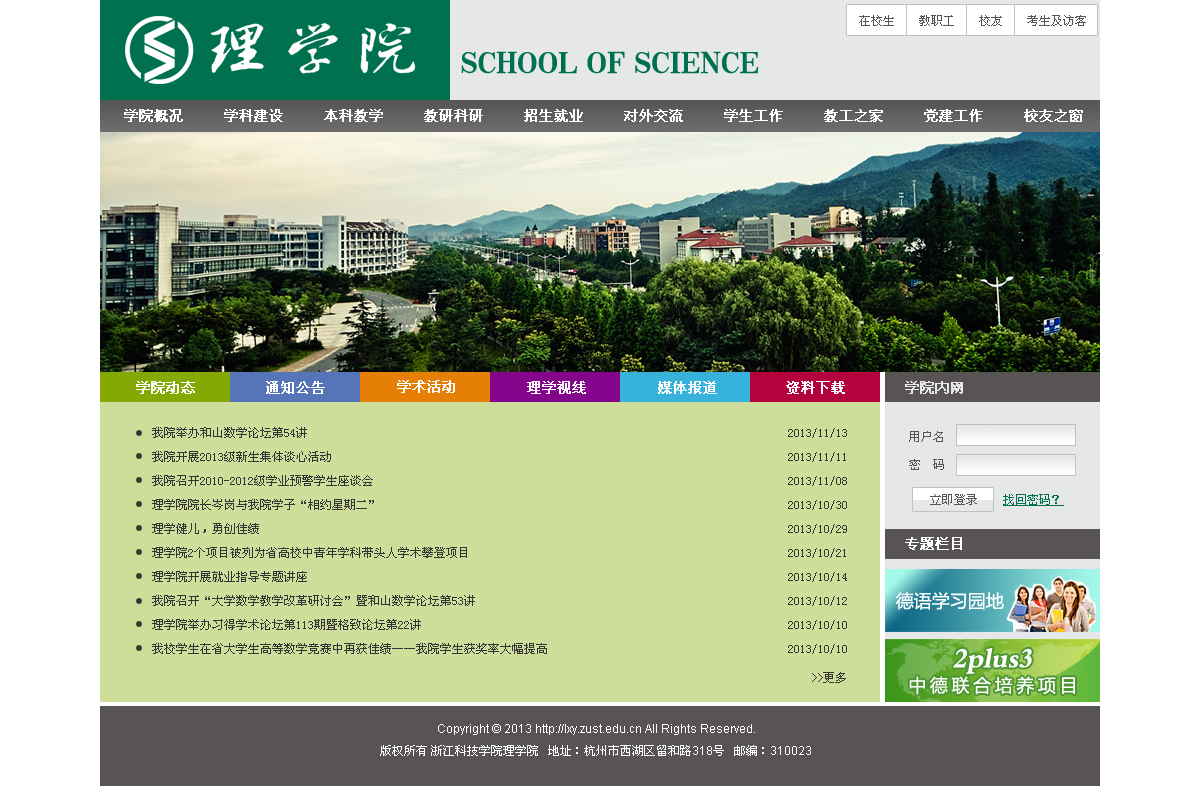
<style>
.page{position:relative;width:1200px;height:786px;background:#cedd9a}
.page>*{position:absolute;margin:0}
.t1{font:12px "SimSun";color:#575453}
.t2{font:30px "¾­µä´ÖËÎ¼ò-regular";color:#00714f}
.t3{font:14px "SimSun";color:#ffffff;font-weight:bold}
.t4{font:14px "SimSun";color:#e6e7e8;font-weight:bold}
.t5{font:12px/24px "SimSun";color:#333333}
.t6{font:12px/28px "SimSun";color:#575453}
.t7{font:12px "SimSun";color:#00714f;text-decoration:underline}
.t8{font:12px "SimSun";color:#333333}
.t9{font:12px/22px "ArialMT";color:#ffffff}
.t10{font:12px/22px "SimSun";color:#ffffff}
</style>
<div class="page">
<p class="t1" style="left:859px;top:15px;width:227px;height:11px">在校生 　 教职工 　 校友 　 考生及访客</p>
<p class="t2" style="left:461px;top:51px;width:298px;height:23px">SCHOOL OF SCIENCE</p>
<p class="t3" style="left:124px;top:109px;width:959px;height:13px">学院概况     学科建设     本科教学     教研科研     招生就业     对外交流     学生工作     教工之家     党建工作     校友之窗</p>
<p class="t3" style="left:136px;top:381px;width:59px;height:13px">学院动态</p>
<p class="t3" style="left:266px;top:381px;width:59px;height:13px">通知公告</p>
<p class="t3" style="left:397px;top:380px;width:58px;height:13px">学术活动</p>
<p class="t3" style="left:527px;top:381px;width:59px;height:13px">理学视线</p>
<p class="t3" style="left:658px;top:381px;width:59px;height:13px">媒体报道</p>
<p class="t3" style="left:786px;top:381px;width:59px;height:13px">资料下载</p>
<p class="t4" style="left:905px;top:381px;width:58px;height:13px">学院内网</p>
<p class="t5" style="left:152px;top:427px;width:695px;height:227px">我院举办和山数学论坛第54讲                 2013/11/13 <br>我院开展2013级新生集体谈心活动                2013/11/11 <br>我院召开2010-2012级学业预警学生座谈会               2013/11/08 <br>理学院院长岑岗与我院学子“相约星期二”               2013/10/30 <br>理学健儿，勇创佳绩                  2013/10/29 <br>理学院2个项目被列为省高校中青年学科带头人学术攀登项目             2013/10/21 <br>理学院开展就业指导专题讲座                 2013/10/14 <br>我院召开“大学数学教学改革研讨会”暨和山数学论坛第53讲            2013/10/12 <br>理学院举办习得学术论坛第113期暨格致论坛第22讲              2013/10/10 <br>我校学生在省大学生高等数学竞赛中再获佳绩——我院学生获奖率大幅提高          2013/10/10</p>
<p class="t6" style="left:909px;top:431px;width:35px;height:39px">用户名<br>密  码</p>
<p class="t1" style="left:930px;top:494px;width:47px;height:11px">立即登录</p>
<p class="t7" style="left:1003px;top:494px;width:61px;height:12px">找回密码？</p>
<p class="t3" style="left:905px;top:537px;width:57px;height:13px">专题栏目</p>
<p class="t8" style="left:812px;top:672px;width:34px;height:11px">&gt;&gt;更多</p>
<p class="t9" style="left:380px;top:724px;width:431px;height:32px;text-align:center">Copyright © 2013 http://lxy.zust.edu.cn All Rights Reserved.<br><span class="t10">版权所有 浙江科技学院理学院   地址：杭州市西湖区留和路</span>318<span class="t10">号   邮编：</span>310023</p>
</div>
